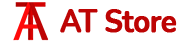
<style>
.page{position:relative;width:196px;height:41px;background:#ffffff}
.page>*{position:absolute;margin:0}
.t1{font:31.8px "Nunito-Bold";letter-spacing:-0.04em;color:#bd0404;font-weight:bold;scale:0.93 1}
</style>
<div class="page">
<p class="t1" style="left:60px;top:9px;width:117px;height:24px">AT Store</p>
</div>
